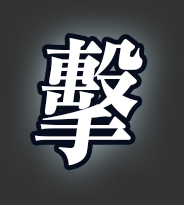
<style>
.page{position:relative;width:184px;height:205px;background:#333333}
.page>*{position:absolute;margin:0}
.t1{font:135.2px "RyuminPro-Heavy";letter-spacing:0.1em;color:#ffffff;font-style:italic;scale:0.78 1}
</style>
<div class="page">
<p class="t1" style="left:34px;top:37px;width:109px;height:129px">擊</p>
</div>
